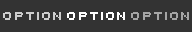
<style>
.page{position:relative;width:192px;height:32px;background:#333333}
.page>*{position:absolute;margin:0}
.t1{font:12.7px "Uni0554";color:#cdcdcd}
.t2{font:12.7px "Uni0554";color:#ffffff}
.t3{font:12.7px "Uni0554";color:#a5a5a5}
</style>
<div class="page">
<p class="t1" style="left:3px;top:12px;width:58px;height:8px">OPTION</p>
<p class="t2" style="left:67px;top:12px;width:58px;height:8px">OPTION</p>
<p class="t3" style="left:131px;top:12px;width:58px;height:8px">OPTION</p>
</div>
